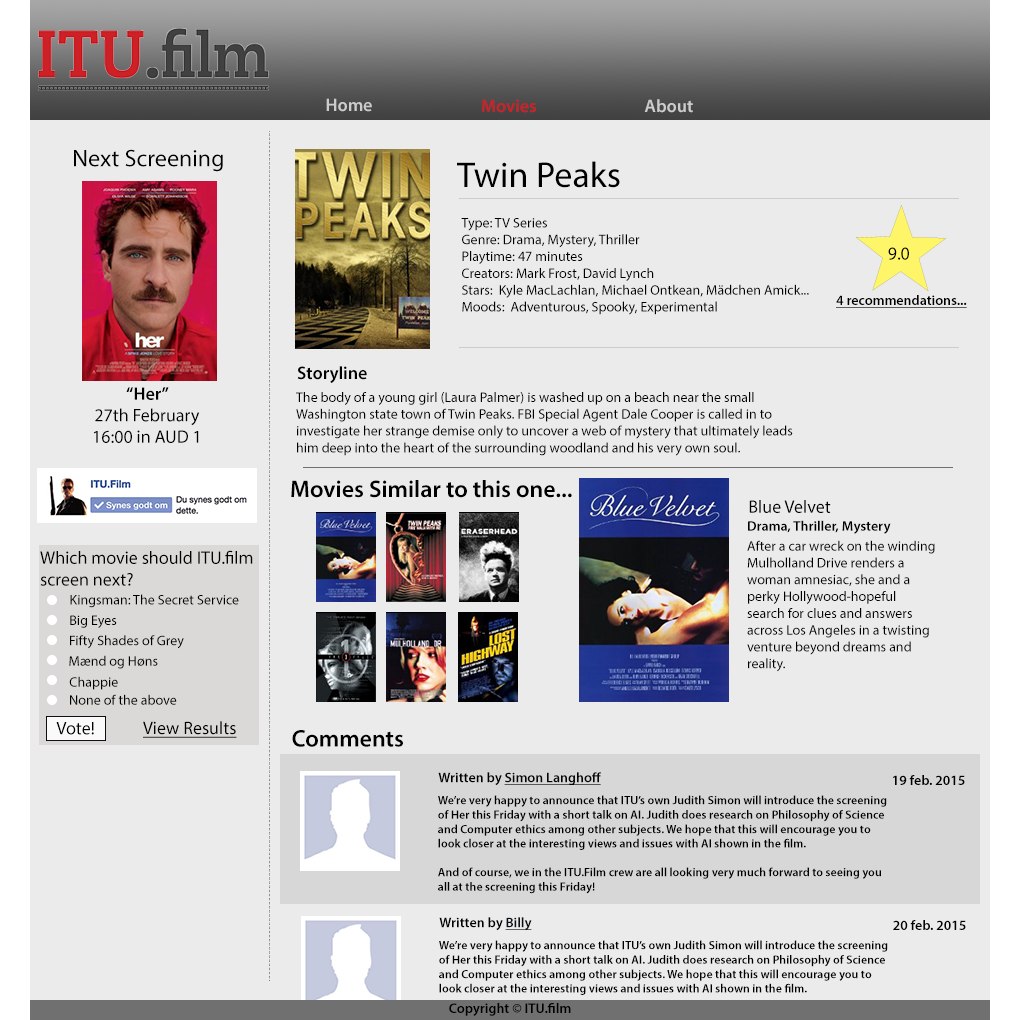
<style>
.page{position:relative;width:1020px;height:1020px;background:#ebebeb}
.page>*{position:absolute;margin:0}
.t1{font:18px "MyriadPro-Semibold";color:#cccccc}
.t2{font:18px "MyriadPro-Semibold";color:#ce2127}
.t3{font:24px "MyriadPro-Regular";color:#000000}
.t4{font:36px "MyriadPro-Regular";color:#000000}
.t5{font:14px "MyriadPro-Regular";color:#000000}
.t6{font:18px "MyriadPro-Regular";color:#000000}
.t7{font:14px "MyriadPro-Semibold";color:#000000;text-decoration:underline}
.t8{font:18px "MyriadPro-Semibold";color:#000000}
.t9{font:24px "MyriadPro-Semibold";color:#000000}
.t10{font:14px "MyriadPro-Semibold";color:#000000}
.t11{font:18px "MyriadPro-Regular";color:#000000;text-decoration:underline}
.t12{font:14px "MyriadPro-Semibold";color:#030506;text-decoration:underline}
.t13{font:12px "MyriadPro-Semibold";color:#000000}
.t14{font:14px "MyriadPro-Semibold";color:#0a1014;text-decoration:underline}
</style>
<div class="page">
<p class="t1" style="left:326px;top:98px;width:46px;height:14px">Home</p>
<p class="t2" style="left:482px;top:99px;width:54px;height:14px">Movies</p>
<p class="t1" style="left:644px;top:99px;width:49px;height:14px">About</p>
<p class="t3" style="left:74px;top:149px;width:149px;height:23px">Next Screening</p>
<p class="t4" style="left:457px;top:161px;width:163px;height:27px">Twin Peaks</p>
<p class="t5" style="left:461px;top:218px;width:348px;height:97px">Type: TV Series <br>Genre: Drama, Mystery, Thriller<br>Playtime: 47 minutes<br>Creators: Mark Frost, David Lynch<br>Stars:  Kyle MacLachlan, Michael Ontkean, Mädchen Amick... <br>Moods:  Adventurous, Spooky, Experimental</p>
<p class="t6" style="left:888px;top:247px;width:21px;height:13px">9.0</p>
<p class="t7" style="left:836px;top:295px;width:131px;height:13px">4 recommendations...</p>
<p class="t8" style="left:297px;top:366px;width:70px;height:17px">Storyline</p>
<p class="t6" style="left:94px;top:387px;width:106px;height:56px;text-align:center"><span class="t8">“Her”<br></span>27th February<br>16:00 in AUD 1</p>
<p class="t5" style="left:296px;top:392px;width:497px;height:64px">The body of a young girl (Laura Palmer) is washed up on a beach near the small <br>Washington state town of Twin Peaks. FBI Special Agent Dale Cooper is called in to <br>investigate her strange demise only to uncover a web of mystery that ultimately leads<br>him deep into the heart of the surrounding woodland and his very own soul.</p>
<p class="t9" style="left:291px;top:480px;width:281px;height:18px">Movies Similar to this one...</p>
<p class="t6" style="left:749px;top:500px;width:82px;height:13px">Blue Velvet</p>
<p class="t10" style="left:748px;top:520px;width:143px;height:14px">Drama, Thriller, Mystery</p>
<p class="t5" style="left:747px;top:540px;width:188px;height:132px">After a car wreck on the winding Mulholland Drive renders a woman amnesiac, she and a perky Hollywood-hopeful search for clues and answers across Los Angeles in a twisting venture beyond dreams and reality.</p>
<p class="t6" style="left:40px;top:550px;width:213px;height:36px">Which movie should ITU.film screen next?</p>
<p class="t5" style="left:70px;top:594px;width:169px;height:14px">Kingsman: The Secret Service</p>
<p class="t5" style="left:70px;top:615px;width:47px;height:13px">Big Eyes</p>
<p class="t5" style="left:70px;top:635px;width:114px;height:14px">Fifty Shades of Grey</p>
<p class="t5" style="left:69px;top:655px;width:89px;height:14px">Mænd og Høns</p>
<p class="t5" style="left:69px;top:676px;width:49px;height:14px">Chappie</p>
<p class="t5" style="left:70px;top:694px;width:107px;height:11px">None of the above</p>
<p class="t6" style="left:56px;top:722px;width:38px;height:13px">Vote!</p>
<p class="t11" style="left:143px;top:721px;width:94px;height:17px">View Results</p>
<p class="t9" style="left:292px;top:730px;width:111px;height:17px">Comments</p>
<p class="t12" style="left:438px;top:772px;width:163px;height:14px"><span class="t10">Written by </span>Simon Langhoff</p>
<p class="t10" style="left:893px;top:775px;width:72px;height:10px">19 feb. 2015</p>
<p class="t13" style="left:438px;top:795px;width:449px;height:99px">We’re very happy to announce that ITU’s own Judith Simon will introduce the screening of Her this Friday with a short talk on AI. Judith does research on Philosophy of Science and Computer ethics among other subjects. We hope that this will encourage you to look closer at the interesting views and issues with AI shown in the film.<br><br>And of course, we in the ITU.Film crew are all looking very much forward to seeing you all at the screening this Friday!</p>
<p class="t10" style="left:439px;top:917px;width:93px;height:14px">Written by <span class="t14">Billy</span></p>
<p class="t10" style="left:893px;top:920px;width:73px;height:10px">20 feb. 2015</p>
<p class="t10" style="left:449px;top:1003px;width:122px;height:13px">Copyright © ITU.film</p>
</div>
